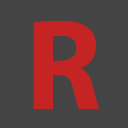
<style>
.page{position:relative;width:128px;height:128px;background:#444444}
.page>*{position:absolute;margin:0}
.t1{font:129px "MyriadPro-Bold";color:#c52424}
</style>
<div class="page">
<p class="t1" style="left:33px;top:21px;width:67px;height:88px">R</p>
</div>
